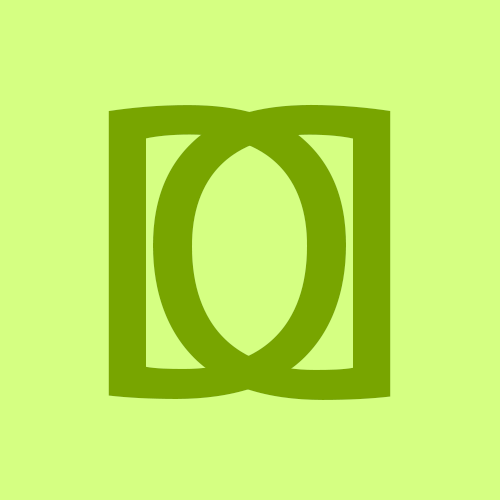
<style>
.page{position:relative;width:500px;height:500px;background:#d5ff82}
.page>*{position:absolute;margin:0}
.t1{font:429.2px "MyriadPro-Regular";color:#78a500}
.t2{font:429.6px "MyriadPro-Regular";color:#78a500}
</style>
<div class="page">
<p class="t1" style="left:108px;top:105px;width:238px;height:294px">D</p>
<p class="t2" style="left:153px;top:104px;width:238px;height:296px;rotate:180deg">D</p>
</div>
